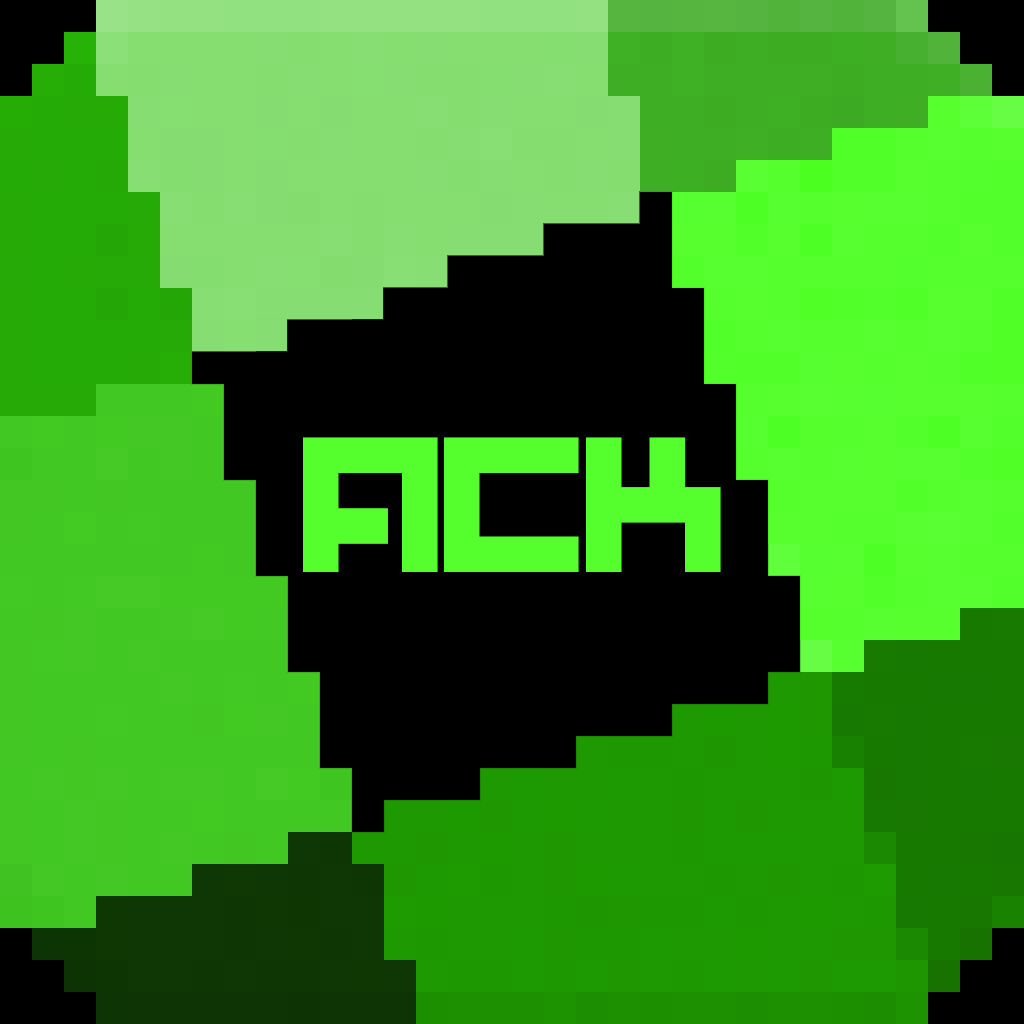
<style>
.page{position:relative;width:1024px;height:1024px;background:#000000}
.page>*{position:absolute;margin:0}
.t1{font:181.1px "D3-Mouldism-Alphabet";color:#55ff2d}
</style>
<div class="page">
<p class="t1" style="left:303px;top:437px;width:418px;height:135px">ACK</p>
</div>
